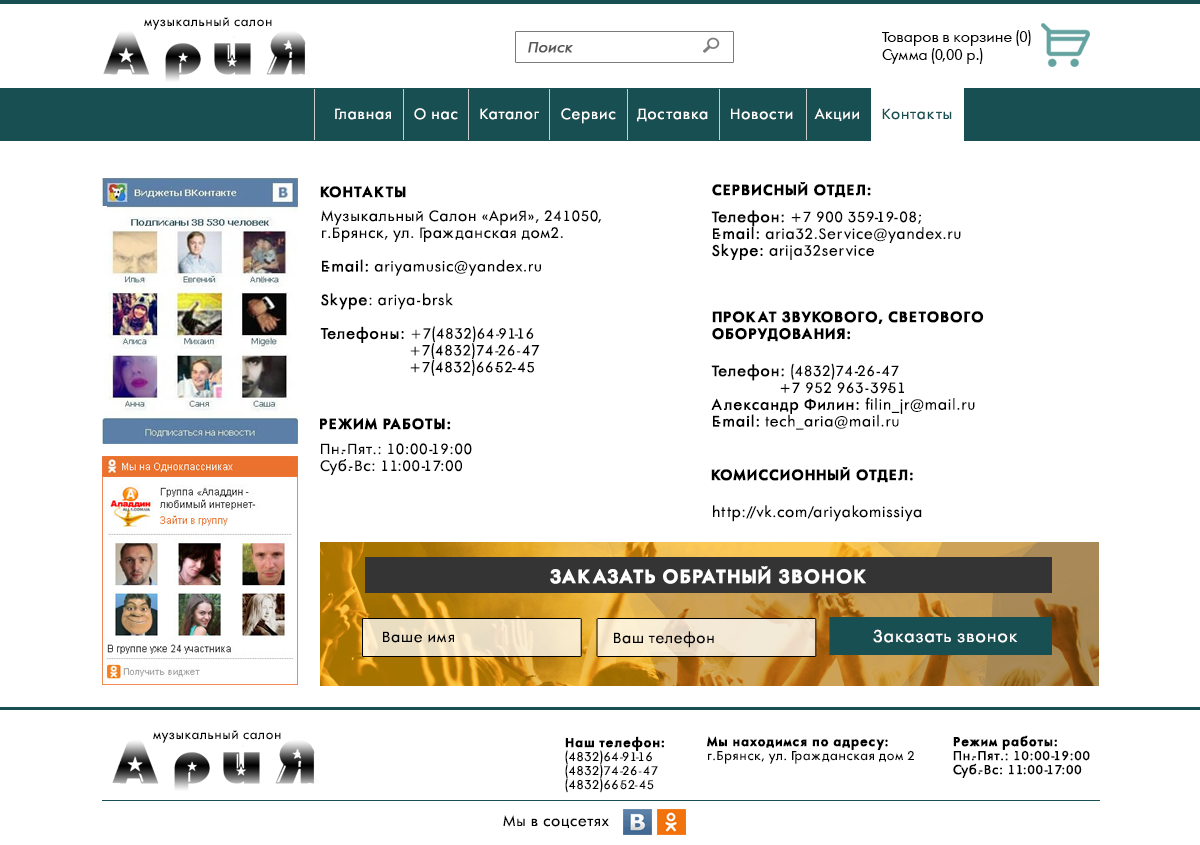
<style>
.page{position:relative;width:1200px;height:845px;background:#ffffff}
.page>*{position:absolute;margin:0}
.t1{font:12px "AFuturaOrto";letter-spacing:0.05em;color:#000000}
.t2{font:14px/18px "AFuturaOrto";color:#000000}
.t3{font:14px "AFuturaOrto";color:#595959;font-weight:bold;font-style:italic}
.t4{font:14px "AFuturaOrto";letter-spacing:0.05em;color:#ffffff}
.t5{font:14px "AFuturaOrto";letter-spacing:0.05em;color:#174f53}
.t6{font:14px "AFuturaOrtoBold";letter-spacing:0.05em;color:#000000;font-weight:bold}
.t7{font:14px "AFuturaOrto";letter-spacing:0.05em;color:#000000}
.t8{font:14px "AFuturaOrto";letter-spacing:0.05em;color:#000000;font-weight:bold}
.t9{font:18px "AFuturaOrtoBold";letter-spacing:0.05em;color:#ffffff;text-transform:uppercase;font-weight:bold}
.t10{font:16px "AFuturaOrto";letter-spacing:0.05em;color:#ffffff}
.t11{font:12px/14px "AFuturaOrto";letter-spacing:0.05em;color:#000000}
.t12{font:12px/14px "AFuturaOrtoBold";letter-spacing:0.05em;color:#000000;font-weight:bold}
.t13{font:12px/14px "AFuturaOrto";letter-spacing:0.05em;color:#000000;font-weight:bold}
</style>
<div class="page">
<p class="t1" style="left:144px;top:17px;width:128px;height:13px">музыкальный салон</p>
<p class="t2" style="left:882px;top:30px;width:149px;height:34px">Товаров в корзине (0)<br>Сумма (0,00 р.)</p>
<p class="t3" style="left:528px;top:42px;width:45px;height:11px">Поиск</p>
<p class="t4" style="left:335px;top:108px;width:617px;height:16px">Главная     О нас     Каталог     Сервис     Доставка     Новости     Акции   <span class="t5">  Контакты</span></p>
<p class="t6" style="left:712px;top:182px;width:159px;height:16px">СЕРВИCНЫЙ ОТДЕЛ:</p>
<p class="t6" style="left:320px;top:186px;width:86px;height:12px">КОНТАКТЫ</p>
<p class="t7" style="left:320px;top:210px;width:281px;height:166px">Музыкальный Салон «АриЯ», 241050,<br>г.Брянск, ул. Гражданская дом2.<br><br><span class="t8">E-mail:</span> ariyamusic@yandex.ru<br><br><span class="t8">Skype</span>: ariya-brsk<br><br><span class="t8">Телефоны:</span> +7(4832)64-91-16<br>                     +7(4832)74-26-47 <br>                     +7(4832)66-52-45</p>
<p class="t7" style="left:711px;top:210px;width:250px;height:50px"><span class="t8">Телефон:</span> +7 900 359-19-08;<br><span class="t8">E-mail:</span> aria32.Service@yandex.ru<br><span class="t8">Skype:</span> arija32service</p>
<p class="t6" style="left:712px;top:311px;width:272px;height:31px">ПРОКАТ ЗВУКОВОГО, СВЕТОВОГО <br>ОБОРУДОВАНИЯ:</p>
<p class="t7" style="left:711px;top:363px;width:264px;height:67px"><span class="t8">Телефон: </span>(4832)74-26-47<br>                +7 952 963-39-51<br><span class="t8">Александр Филин: </span>filin_jr@mail.ru<br><span class="t8">E-mail:</span> tech_aria@mail.ru</p>
<p class="t6" style="left:320px;top:418px;width:131px;height:12px">РЕЖИМ РАБОТЫ:</p>
<p class="t7" style="left:320px;top:443px;width:152px;height:32px">Пн.-Пят.: 10:00-19:00<br>Суб.-Вс: 11:00-17:00</p>
<p class="t6" style="left:711px;top:467px;width:202px;height:16px">КОМИССИОННЫЙ ОТДЕЛ:</p>
<p class="t7" style="left:713px;top:505px;width:209px;height:17px">http://vk.com/ariyakomissiya</p>
<p class="t9" style="left:550px;top:566px;width:316px;height:18px">Заказать обратный звонок</p>
<p class="t10" style="left:873px;top:629px;width:145px;height:14px">Заказать звонок</p>
<p class="t7" style="left:383px;top:631px;width:71px;height:12px">Ваше имя</p>
<p class="t7" style="left:614px;top:631px;width:100px;height:17px">Ваш телефон</p>
<p class="t1" style="left:153px;top:730px;width:128px;height:13px">музыкальный салон</p>
<p class="t11" style="left:565px;top:736px;width:99px;height:57px"><span class="t12">Наш телефон:<br></span>(4832)64-91-16<br>(4832)74-26-47 <br>(4832)66-52-45</p>
<p class="t11" style="left:707px;top:736px;width:207px;height:28px"><span class="t12">Мы находимся по адресу:<br></span>г.Брянск, ул. Гражданская дом 2</p>
<p class="t13" style="left:953px;top:735px;width:137px;height:43px"><span class="t12">Режим работы:<br></span>Пн.-Пят.: 10:00-19:00<br>Суб.-Вс: 11:00-17:00</p>
<p class="t7" style="left:503px;top:815px;width:106px;height:13px">Мы в соцсетях</p>
</div>
